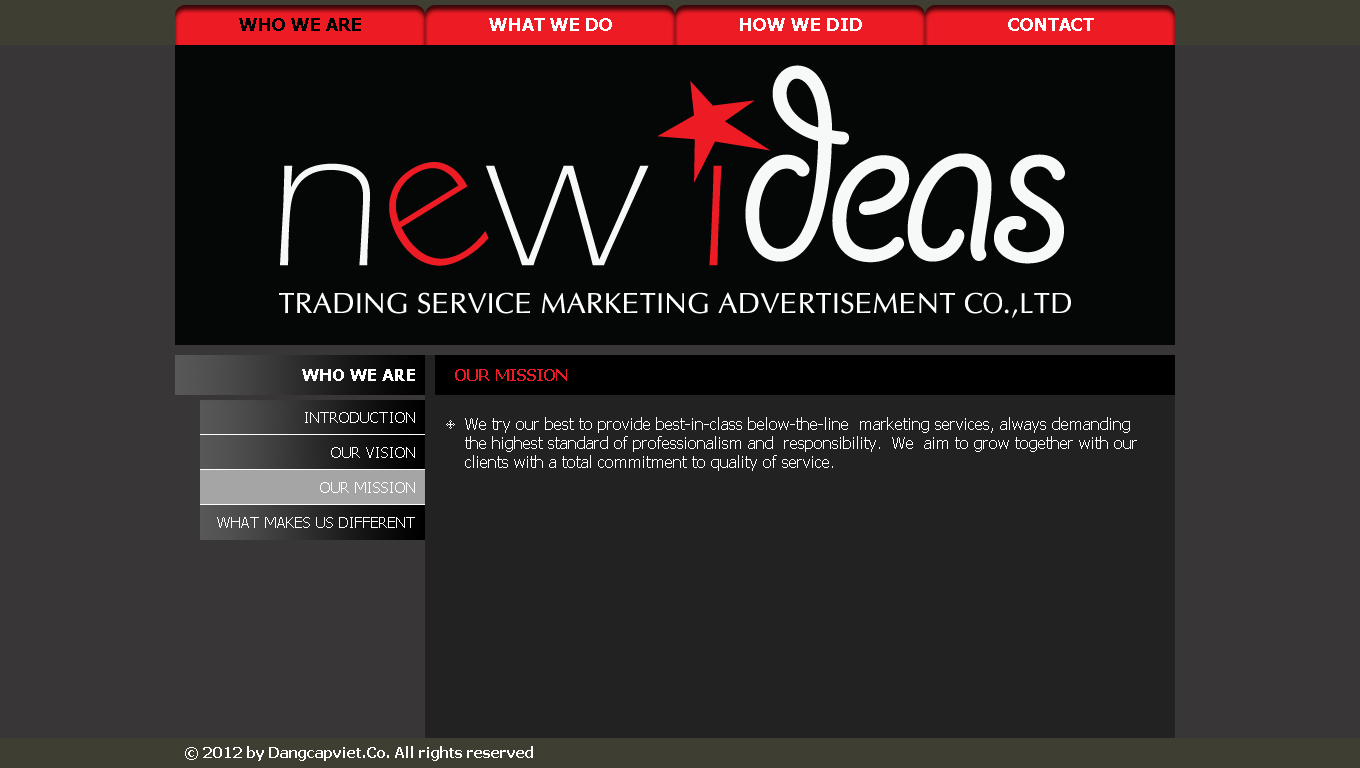
<style>
.page{position:relative;width:1360px;height:768px;background:#383636}
.page>*{position:absolute;margin:0}
.t1{font:18px "Tahoma-Bold";color:#000000}
.t2{font:18px "Tahoma-Bold";color:#ffffff}
.t3{font:17px "Tahoma-Bold";color:#ffffff}
.t4{font:16px "Tahoma-Bold";color:#ed1c24}
.t5{font:15px "Tahoma";color:#ffffff}
.t6{font:16px "Tahoma";color:#ffffff}
.t7{font:15px "Tahoma-Bold";color:#ffffff}
</style>
<div class="page">
<p class="t1" style="left:239px;top:18px;width:122px;height:13px">WHO WE ARE</p>
<p class="t2" style="left:489px;top:18px;width:123px;height:13px">WHAT WE DO</p>
<p class="t2" style="left:740px;top:18px;width:122px;height:13px">HOW WE DID</p>
<p class="t2" style="left:1008px;top:18px;width:86px;height:13px">CONTACT</p>
<p class="t3" style="left:302px;top:369px;width:113px;height:12px">WHO WE ARE</p>
<p class="t4" style="left:455px;top:369px;width:112px;height:12px">OUR MISSION</p>
<p class="t5" style="left:305px;top:412px;width:110px;height:11px">INTRODUCTION</p>
<p class="t6" style="left:465px;top:417px;width:672px;height:54px">We try our best to provide best-in-class below-the-line  marketing services, always demanding the highest standard of professionalism and  responsibility.  We  aim to grow together with our clients with a total commitment to quality of service.</p>
<p class="t5" style="left:331px;top:447px;width:84px;height:11px">OUR VISION</p>
<p class="t5" style="left:320px;top:482px;width:95px;height:11px">OUR MISSION</p>
<p class="t5" style="left:217px;top:517px;width:198px;height:11px">WHAT MAKES US DIFFERENT</p>
<p class="t7" style="left:185px;top:746px;width:348px;height:15px">© 2012 by Dangcapviet.Co. All rights reserved</p>
</div>
